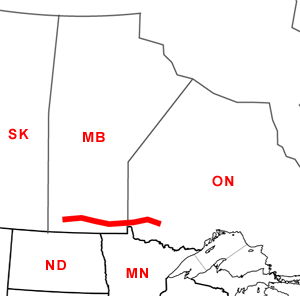
<style>
.page{position:relative;width:300px;height:296px;background:#ffffff}
.page>*{position:absolute;margin:0}
.t1{font:14px "Arial-BoldMT";letter-spacing:0.1em;color:#ff0000}
</style>
<div class="page">
<p class="t1" style="left:8px;top:128px;width:21px;height:12px">SK</p>
<p class="t1" style="left:83px;top:132px;width:22px;height:10px">MB</p>
<p class="t1" style="left:212px;top:175px;width:22px;height:12px">ON</p>
<p class="t1" style="left:46px;top:260px;width:20px;height:10px">ND</p>
<p class="t1" style="left:126px;top:268px;width:22px;height:10px">MN</p>
</div>
